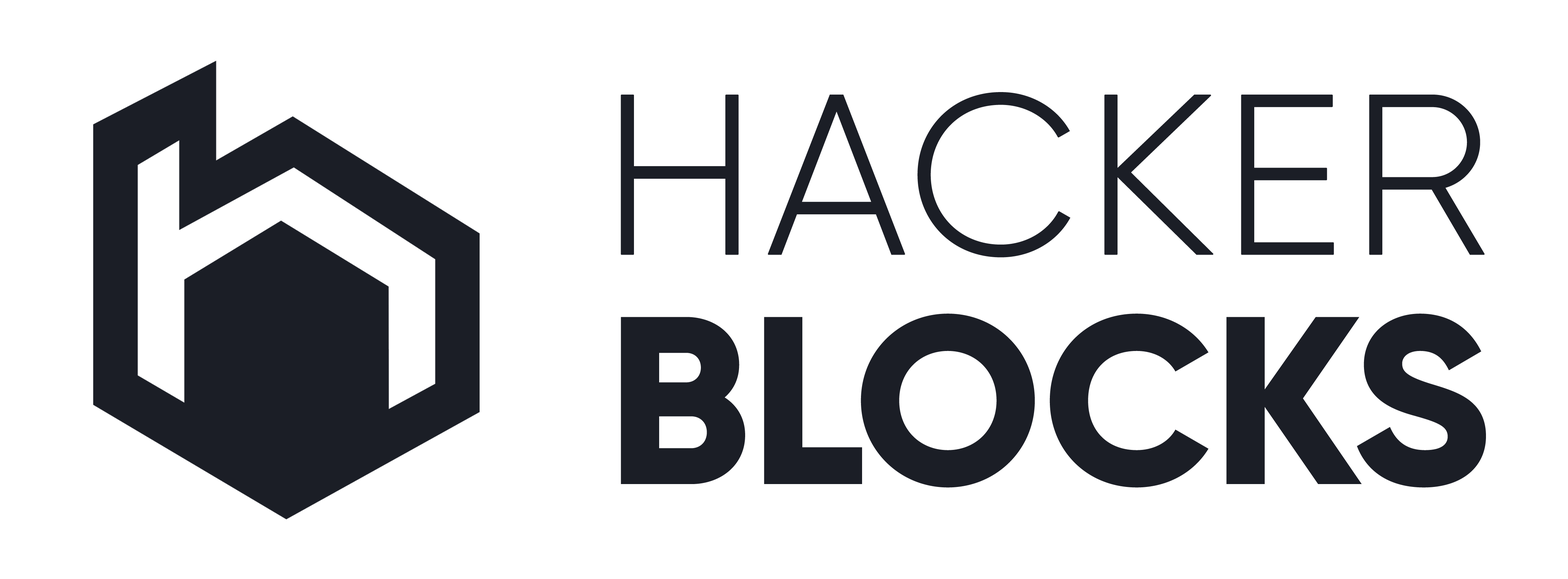
<style>
.page{position:relative;width:1568px;height:579px;background:#ffffff}
.page>*{position:absolute;margin:0}
.t1{font:227.4px "Gilroy-Light";color:#1b1e26;font-weight:bold}
.t2{font:238.7px "Gilroy-ExtraBold";color:#1b1e26}
</style>
<div class="page">
<p class="t1" style="left:621px;top:92px;width:864px;height:166px">HACKER</p>
<p class="t2" style="left:621px;top:314px;width:865px;height:174px">BLOCKS</p>
</div>
